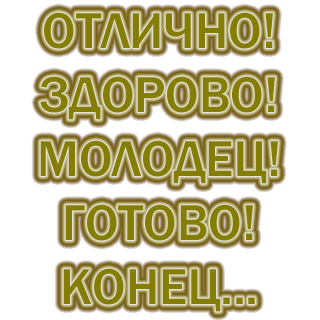
<style>
.page{position:relative;width:320px;height:320px;background:#ffffff}
.page>*{position:absolute;margin:0}
.t1{font:52px/64px "FranklinGothic-Medium";color:#847d06}
</style>
<div class="page">
<p class="t1" style="left:40px;top:12px;width:238px;height:300px;text-align:center">ОТЛИЧНО!<br>ЗДОРОВО!<br>МОЛОДЕЦ!<br>ГОТОВО!<br>КОНЕЦ...</p>
</div>
